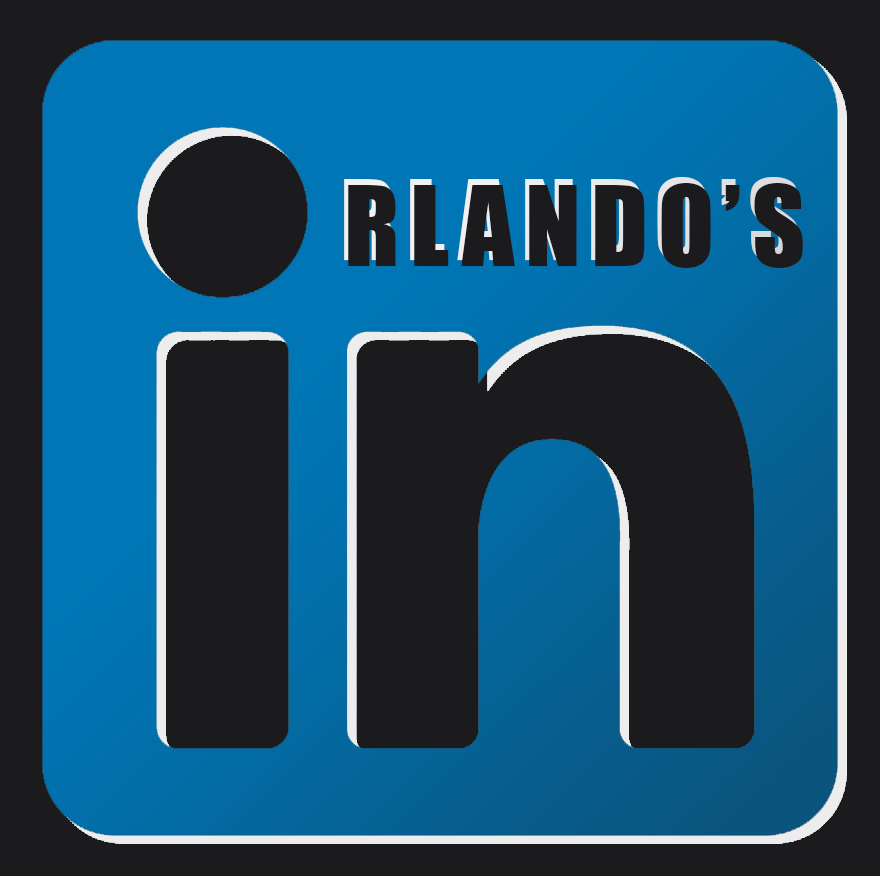
<style>
.page{position:relative;width:880px;height:876px;background:#1b1b1e}
.page>*{position:absolute;margin:0}
.t1{font:103px "Impact";letter-spacing:0.1em;color:#1b1b1e}
</style>
<div class="page">
<p class="t1" style="left:344px;top:177px;width:455px;height:85px">RLANDO’S</p>
<p class="t1" style="left:348px;top:183px;width:455px;height:85px">RLANDO’S</p>
</div>
